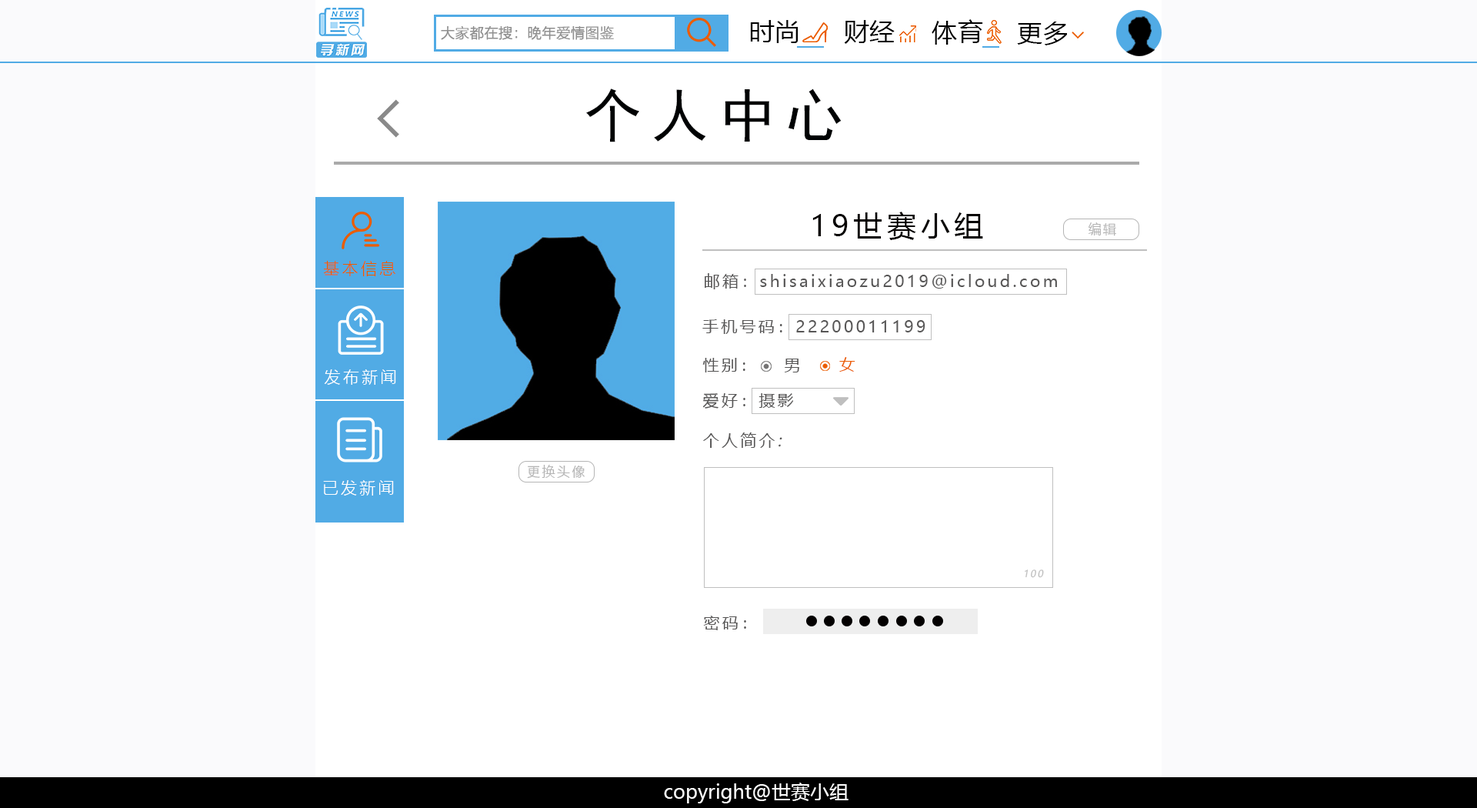
<style>
.page{position:relative;width:1477px;height:808px;background:#ffffff}
.page>*{position:absolute;margin:0}
.t1{font:14.1px "MicrosoftYaHeiLight";color:#8f8f8f;font-weight:bold}
.t2{font:25.6px "MicrosoftYaHei";color:#000000}
.t3{font:57.7px "SimHei";letter-spacing:0.165em;color:#000203}
.t4{font:28.8px "MicrosoftYaHei";letter-spacing:0.165em;color:#050201}
.t5{font:12.8px "MicrosoftYaHei";letter-spacing:0.165em;color:#b5b5b5}
.t6{font:16px "MicrosoftYaHeiLight";letter-spacing:0.165em;color:#eb5c00}
.t7{font:16px "MicrosoftYaHei";letter-spacing:0.165em;color:#575656}
.t8{font:16px "MicrosoftYaHei";letter-spacing:0.165em;color:#eb5c00}
.t9{font:16px "MicrosoftYaHeiLight";letter-spacing:0.165em;color:#ffffff}
.t10{font:16px "MicrosoftYaHei";letter-spacing:0.165em;color:#575656;font-style:italic}
.t11{font:16px "MicrosoftYaHeiLight";letter-spacing:0.165em;color:#fffefe}
.t12{font:9.6px "MicrosoftYaHei";letter-spacing:0.165em;color:#bfbfbf;font-style:italic}
.t13{font:19.2px "MicrosoftYaHei";color:#fefefe}
</style>
<div class="page">
<p class="t1" style="left:441px;top:26px;width:173px;height:14px">大家都在搜：晚年爱情图鉴</p>
<p class="t2" style="left:750px;top:20px;width:48px;height:23px">时尚</p>
<p class="t2" style="left:844px;top:20px;width:50px;height:24px">财经</p>
<p class="t2" style="left:931px;top:19px;width:52px;height:26px">体育</p>
<p class="t2" style="left:1017px;top:22px;width:50px;height:23px">更多</p>
<p class="t3" style="left:586px;top:88px;width:255px;height:54px">个人中心</p>
<p class="t4" style="left:812px;top:211px;width:171px;height:29px">19世赛小组</p>
<p class="t5" style="left:1088px;top:222px;width:28px;height:14px">编辑</p>
<p class="t6" style="left:323px;top:260px;width:72px;height:16px">基本信息</p>
<p class="t7" style="left:704px;top:273px;width:353px;height:16px">邮箱：shisaixiaozu2019@icloud.com</p>
<p class="t7" style="left:702px;top:319px;width:223px;height:15px">手机号码：22200011199</p>
<p class="t7" style="left:702px;top:358px;width:43px;height:14px">性别：</p>
<p class="t7" style="left:784px;top:358px;width:15px;height:14px">男</p>
<p class="t8" style="left:839px;top:357px;width:16px;height:14px">女</p>
<p class="t9" style="left:324px;top:369px;width:72px;height:16px">发布新闻</p>
<p class="t7" style="left:702px;top:393px;width:92px;height:15px">爱好：摄影</p>
<p class="t7" style="left:703px;top:432px;width:79px;height:16px">个人简介<span class="t10">:</span></p>
<p class="t5" style="left:527px;top:465px;width:58px;height:13px">更换头像</p>
<p class="t11" style="left:323px;top:480px;width:71px;height:15px">已发新闻</p>
<p class="t12" style="left:1024px;top:569px;width:20px;height:9px">100</p>
<p class="t7" style="left:703px;top:615px;width:43px;height:15px">密码：</p>
<p class="t13" style="left:664px;top:782px;width:184px;height:21px">copyright@世赛小组</p>
</div>
